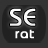
<style>
.page{position:relative;width:48px;height:48px;background:#333333}
.page>*{position:absolute;margin:0}
.t1{font:24px "Bauhaus";letter-spacing:0.05em;color:#ffffff;font-weight:bold}
.t2{font:14px "Bauhaus";letter-spacing:0.05em;color:#ffffff;font-weight:bold}
</style>
<div class="page">
<p class="t1" style="left:10px;top:8px;width:26px;height:18px">SE</p>
<p class="t2" style="left:15px;top:29px;width:19px;height:10px">rat</p>
</div>
